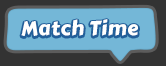
<style>
.page{position:relative;width:166px;height:66px;background:#74b7d7}
.page>*{position:absolute;margin:0}
.t1{font:20px "CarterOne";letter-spacing:0.025em;color:#ffffff}
</style>
<div class="page">
<p class="t1" style="left:21px;top:19px;width:117px;height:17px">Match Time</p>
</div>
